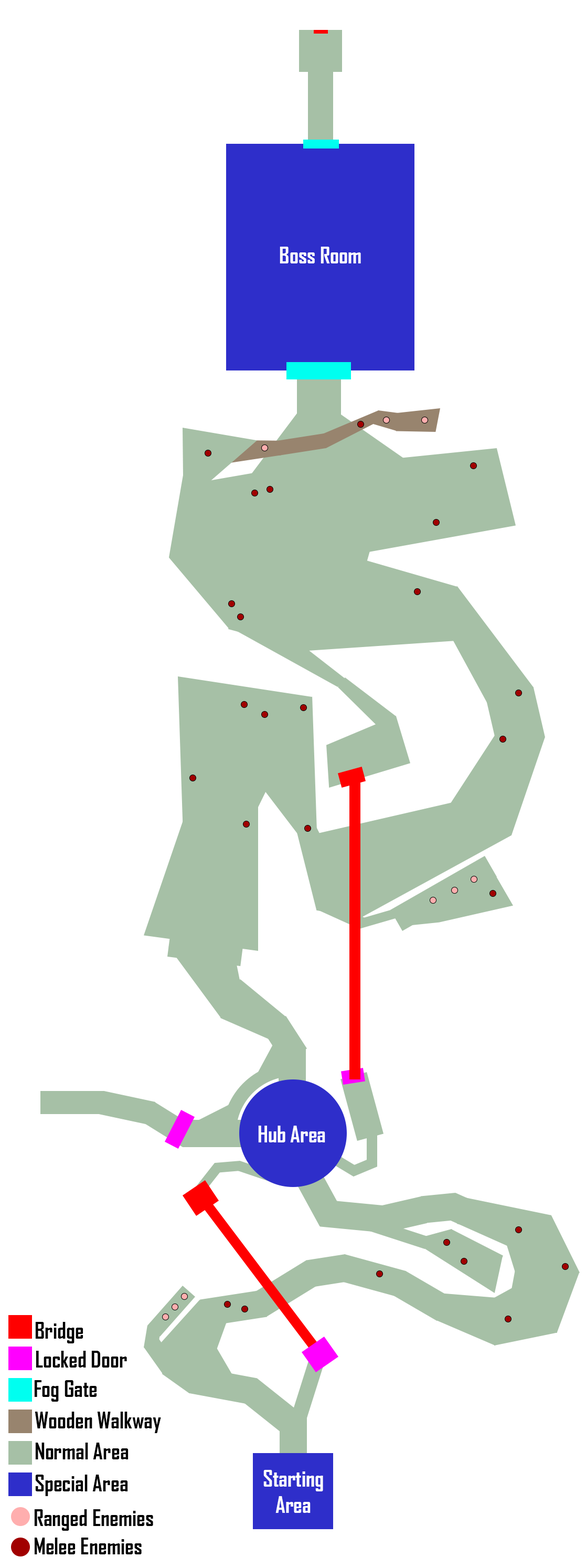
<style>
.page{position:relative;width:586px;height:1568px;background:#ffffff}
.page>*{position:absolute;margin:0}
.t1{font:21.9px "AgencyFB-Bold";color:#ffffff}
.t2{font:21.9px "AgencyFB-Bold";color:#000000}
</style>
<div class="page">
<p class="t1" style="left:280px;top:247px;width:81px;height:16px">Boss Room</p>
<p class="t1" style="left:258px;top:1126px;width:67px;height:16px">Hub Area</p>
<p class="t2" style="left:35px;top:1322px;width:48px;height:21px">Bridge</p>
<p class="t2" style="left:36px;top:1351px;width:91px;height:17px">Locked Door</p>
<p class="t2" style="left:34px;top:1380px;width:63px;height:22px">Fog Gate</p>
<p class="t2" style="left:35px;top:1412px;width:126px;height:21px">Wooden Walkway</p>
<p class="t2" style="left:35px;top:1443px;width:94px;height:16px">Normal Area</p>
<p class="t1" style="left:263px;top:1470px;width:60px;height:43px;text-align:center">Starting<br>Area</p>
<p class="t2" style="left:35px;top:1475px;width:93px;height:21px">Special Area</p>
<p class="t2" style="left:34px;top:1509px;width:119px;height:22px">Ranged Enemies</p>
<p class="t2" style="left:35px;top:1538px;width:107px;height:16px">Melee Enemies</p>
</div>
